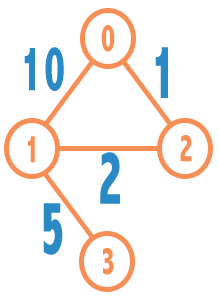
<style>
.page{position:relative;width:219px;height:300px;background:#ffffff}
.page>*{position:absolute;margin:0}
.t1{font:40px "AbadiMT-CondensedExtraBold";letter-spacing:0.075em;color:#f68e56;scale:0.68 1}
.t2{font:64.7px "AbadiMT-CondensedExtraBold";letter-spacing:0.075em;color:#2b89c5;scale:0.62 1}
.t3{font:77.7px "AbadiMT-CondensedExtraBold";letter-spacing:0.075em;color:#2b89c5;scale:0.62 1}
</style>
<div class="page">
<p class="t1" style="left:101px;top:25px;width:14px;height:27px">0</p>
<p class="t2" style="left:24px;top:47px;width:40px;height:44px">10</p>
<p class="t3" style="left:155px;top:47px;width:13px;height:51px">1</p>
<p class="t1" style="left:28px;top:136px;width:7px;height:27px">1</p>
<p class="t1" style="left:180px;top:135px;width:12px;height:27px">2</p>
<p class="t3" style="left:100px;top:152px;width:20px;height:52px">2</p>
<p class="t3" style="left:43px;top:203px;width:20px;height:52px">5</p>
<p class="t1" style="left:103px;top:248px;width:11px;height:27px">3</p>
</div>
